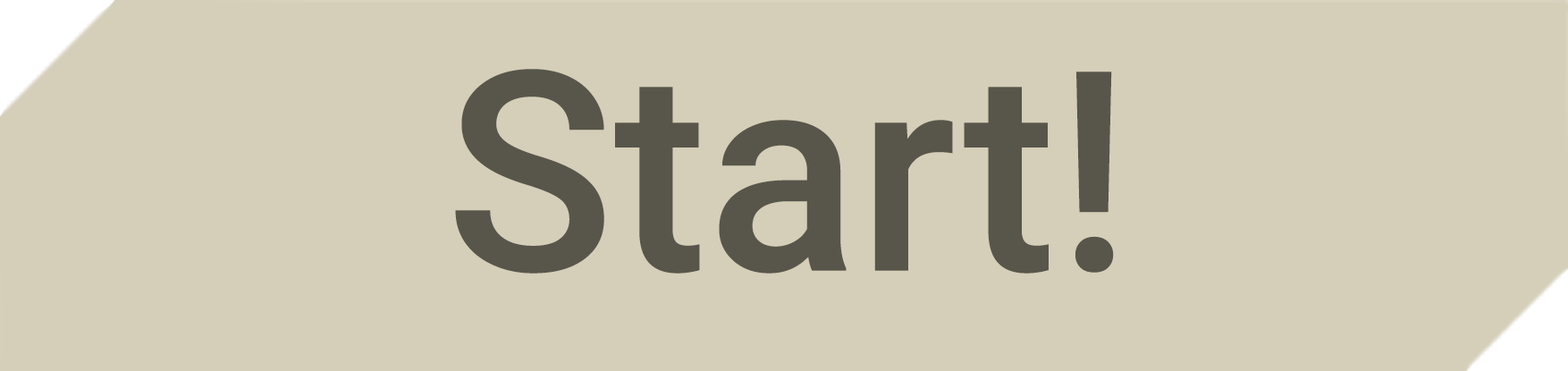
<style>
.page{position:relative;width:1568px;height:371px;background:#d5ceb8}
.page>*{position:absolute;margin:0}
.t1{font:279.4px "Roboto-Medium";color:#58564b}
</style>
<div class="page">
<p class="t1" style="left:455px;top:69px;width:659px;height:205px">Start!</p>
</div>
